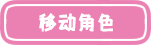
<style>
.page{position:relative;width:151px;height:45px;background:#eb81b2}
.page>*{position:absolute;margin:0}
.t1{font:12px "shetumodengxiaofangti";color:#ffffff;font-weight:bold;scale:0.94 1}
</style>
<div class="page">
<p class="t1" style="left:39px;top:13px;width:74px;height:19px">移动角色</p>
</div>
